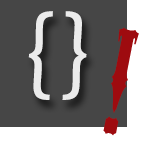
<style>
.page{position:relative;width:144px;height:144px;background:#464646}
.page>*{position:absolute;margin:0}
.t1{font:100px "ErasITC-Medium";color:#ebebeb}
.t2{font:140px "MesquiteStd";color:#9e0b0f}
</style>
<div class="page">
<p class="t1" style="left:28px;top:11px;width:59px;height:89px">{}</p>
<p class="t2" style="left:103px;top:27px;width:36px;height:109px;rotate:11deg">!</p>
</div>
